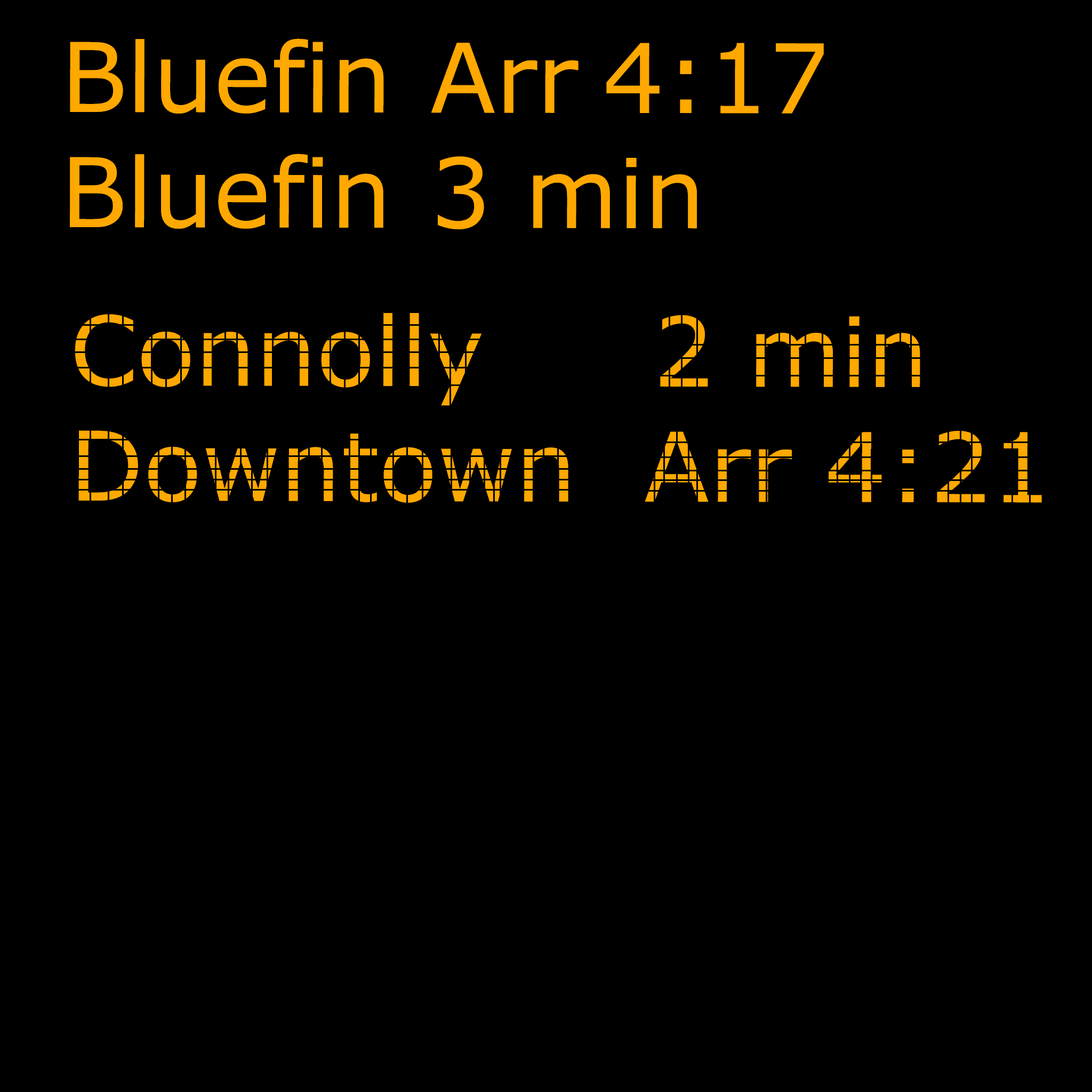
<style>
.page{position:relative;width:1092px;height:1092px;background:#000000}
.page>*{position:absolute;margin:0}
.t1{font:96px "MSReferenceSansSerif";color:#ffa800}
</style>
<div class="page">
<p class="t1" style="left:70px;top:38px;width:754px;height:191px">Bluefin   Arr  4:17<br> Bluefin   3 min</p>
<p class="t1" style="left:75px;top:312px;width:967px;height:191px">Connolly     2 min<br>Downtown  Arr 4:21</p>
</div>
